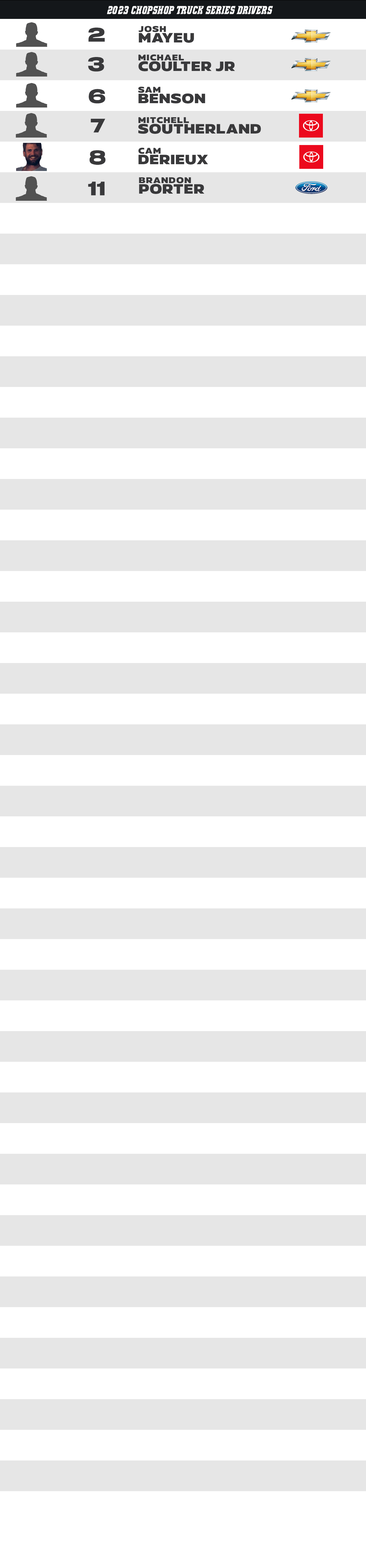
<style>
.page{position:relative;width:366px;height:1568px;background:#ffffff}
.page>*{position:absolute;margin:0}
.t1{font:10px "Demonized";letter-spacing:0.02em;color:#ffffff;scale:0.61 1}
.t2{font:18.5px "Benzin-ExtraBold";letter-spacing:0.02em;color:#39393b;scale:0.94 1}
.t3{font:12.1px/10.5px "Meutas-ExtraBold";letter-spacing:0.02em;color:#39393b;scale:1.24 1}
.t4{font:7.4px/10.5px "Meutas-ExtraBold";letter-spacing:0.02em;color:#39393b;scale:1.24 1}
</style>
<div class="page">
<p class="t1" style="left:107px;top:6px;width:166px;height:8px">2023 CHOPSHOP TRUCK SERIES DRIVERS</p>
<p class="t2" style="left:88px;top:28px;width:17px;height:14px">2</p>
<p class="t3" style="left:138px;top:26px;width:56px;height:17px"><span class="t4">JOSH <br></span>MAYEU</p>
<p class="t2" style="left:88px;top:57px;width:16px;height:15px">3</p>
<p class="t3" style="left:138px;top:54px;width:97px;height:17px"><span class="t4">MICHAEL <br></span>COULTER JR</p>
<p class="t2" style="left:89px;top:89px;width:16px;height:14px">6</p>
<p class="t3" style="left:138px;top:86px;width:67px;height:17px"><span class="t4">SAM <br></span>BENSON</p>
<p class="t2" style="left:90px;top:119px;width:15px;height:14px">7</p>
<p class="t3" style="left:138px;top:117px;width:123px;height:17px"><span class="t4">MITCHELL <br></span>SOUTHERLAND</p>
<p class="t3" style="left:138px;top:147px;width:70px;height:18px"><span class="t4">CAM <br></span>DERIEUX</p>
<p class="t2" style="left:89px;top:150px;width:16px;height:15px">8</p>
<p class="t2" style="left:88px;top:182px;width:16px;height:13px">11</p>
<p class="t4" style="left:139px;top:177px;width:65px;height:17px">BRANDON <br><span class="t3">PORTER</span></p>
</div>
